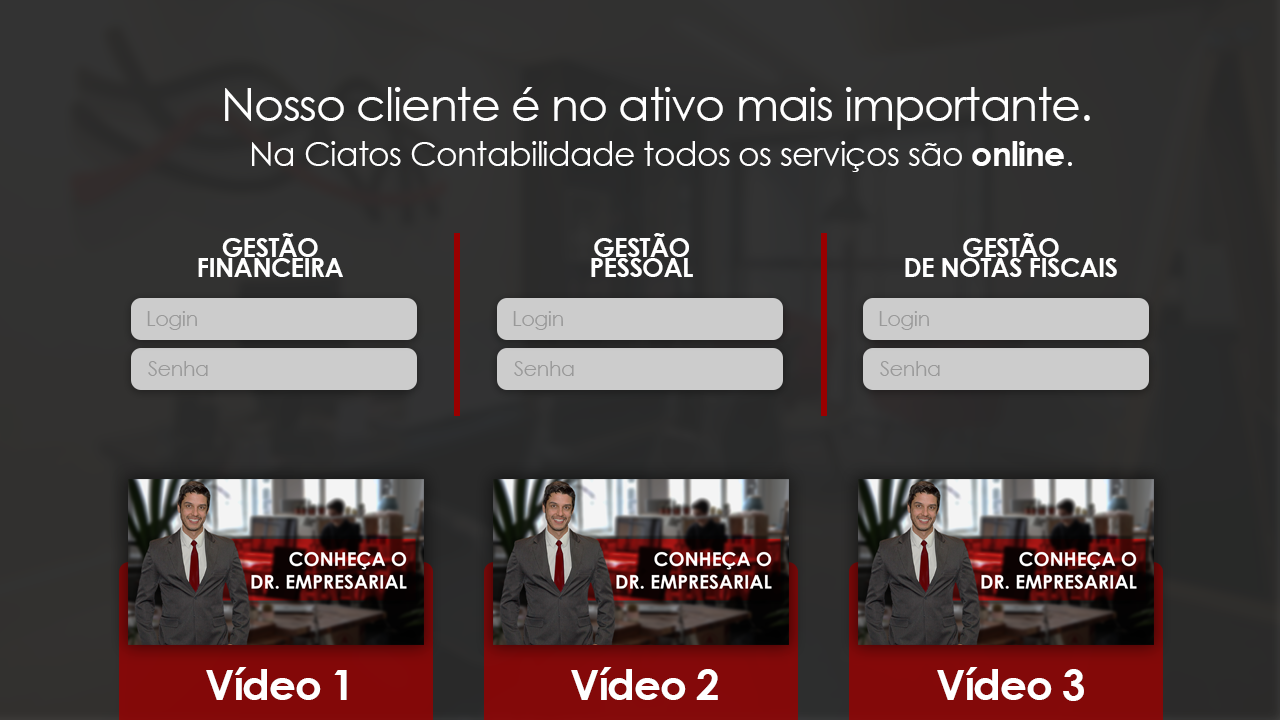
<style>
.page{position:relative;width:1280px;height:720px}
.page>*{position:absolute;margin:0}
.t1{font:45.8px "CenturyGothic";letter-spacing:-0.025em;color:#ffffff}
.t2{font:33.3px "CenturyGothic";letter-spacing:-0.025em;color:#ffffff}
.t3{font:33.3px "CenturyGothic-Bold";letter-spacing:-0.025em;color:#ffffff}
.t4{font:26px/20.8px "CenturyGothic-Bold";letter-spacing:-0.025em;color:#ffffff}
.t5{font:41.7px "CenturyGothic-Bold";letter-spacing:-0.025em;color:#ffffff}
</style>
<div class="page">
<p class="t1" style="left:225px;top:87px;width:865px;height:43px">Nosso cliente é no ativo mais importante.</p>
<p class="t2" style="left:252px;top:141px;width:820px;height:31px">Na Ciatos Contabilidade todos os serviços são <span class="t3">online</span>.</p>
<p class="t4" style="left:198px;top:233px;width:145px;height:44px;text-align:center">GESTÃO<br>FINANCEIRA</p>
<p class="t4" style="left:591px;top:233px;width:102px;height:44px;text-align:center">GESTÃO<br>PESSOAL</p>
<p class="t4" style="left:905px;top:233px;width:212px;height:44px;text-align:center">GESTÃO<br>DE NOTAS FISCAIS</p>
<p class="t5" style="left:206px;top:667px;width:141px;height:33px">Vídeo 1</p>
<p class="t5" style="left:571px;top:667px;width:147px;height:33px">Vídeo 2</p>
<p class="t5" style="left:937px;top:667px;width:147px;height:34px">Vídeo 3</p>
</div>
